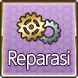
<style>
.page{position:relative;width:78px;height:78px}
.page>*{position:absolute;margin:0}
.t1{font:18px "UDShinGoPro-Regular";letter-spacing:-0.04em;color:#ffffff;scale:0.9 1}
</style>
<div class="page">
<p class="t1" style="left:8px;top:50px;width:62px;height:20px">Reparasi</p>
</div>
